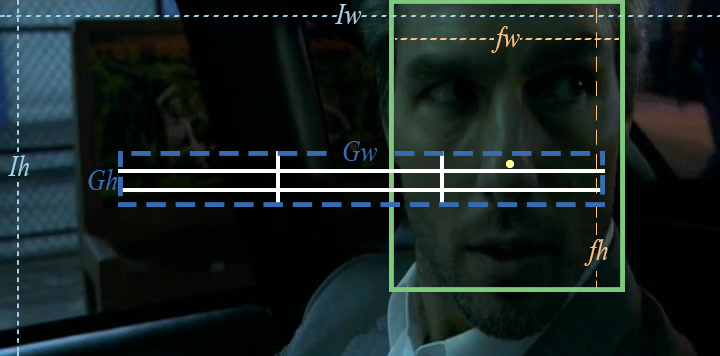
<style>
.page{position:relative;width:720px;height:356px}
.page>*{position:absolute;margin:0}
.t1{font:30px "TimesNewRomanPS-ItalicMT";color:#a6cee3;scale:0.84 1}
.t2{font:30px "TimesNewRomanPS-ItalicMT";color:#fdc086;scale:0.84 1}
.t3{font:30px "TimesNewRomanPS-ItalicMT";color:#386cb0;scale:0.84 1}
</style>
<div class="page">
<p class="t1" style="left:335px;top:4px;width:27px;height:20px">Iw</p>
<p class="t2" style="left:491px;top:26px;width:29px;height:27px">fw</p>
<p class="t1" style="left:8px;top:155px;width:21px;height:21px">Ih</p>
<p class="t3" style="left:88px;top:169px;width:29px;height:21px">Gh</p>
<p class="t2" style="left:584px;top:239px;width:24px;height:27px">fh</p>
</div>
